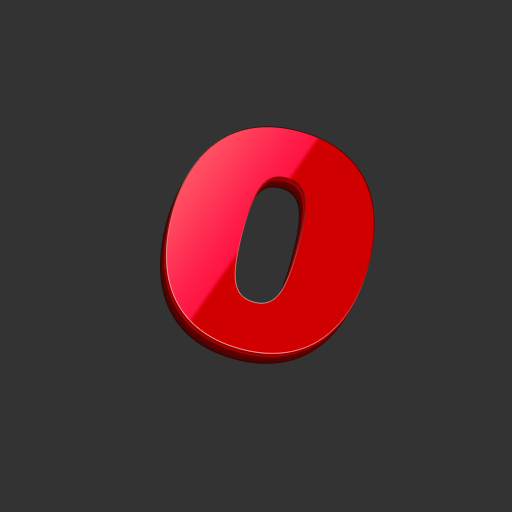
<style>
.page{position:relative;width:512px;height:512px;background:#333333}
.page>*{position:absolute;margin:0}
.t1{font:305.6px "FiraSans-Ultra"}
</style>
<div class="page">
<p class="t1" style="left:166px;top:126px;width:209px;height:228px;rotate:15deg">O</p>
</div>
